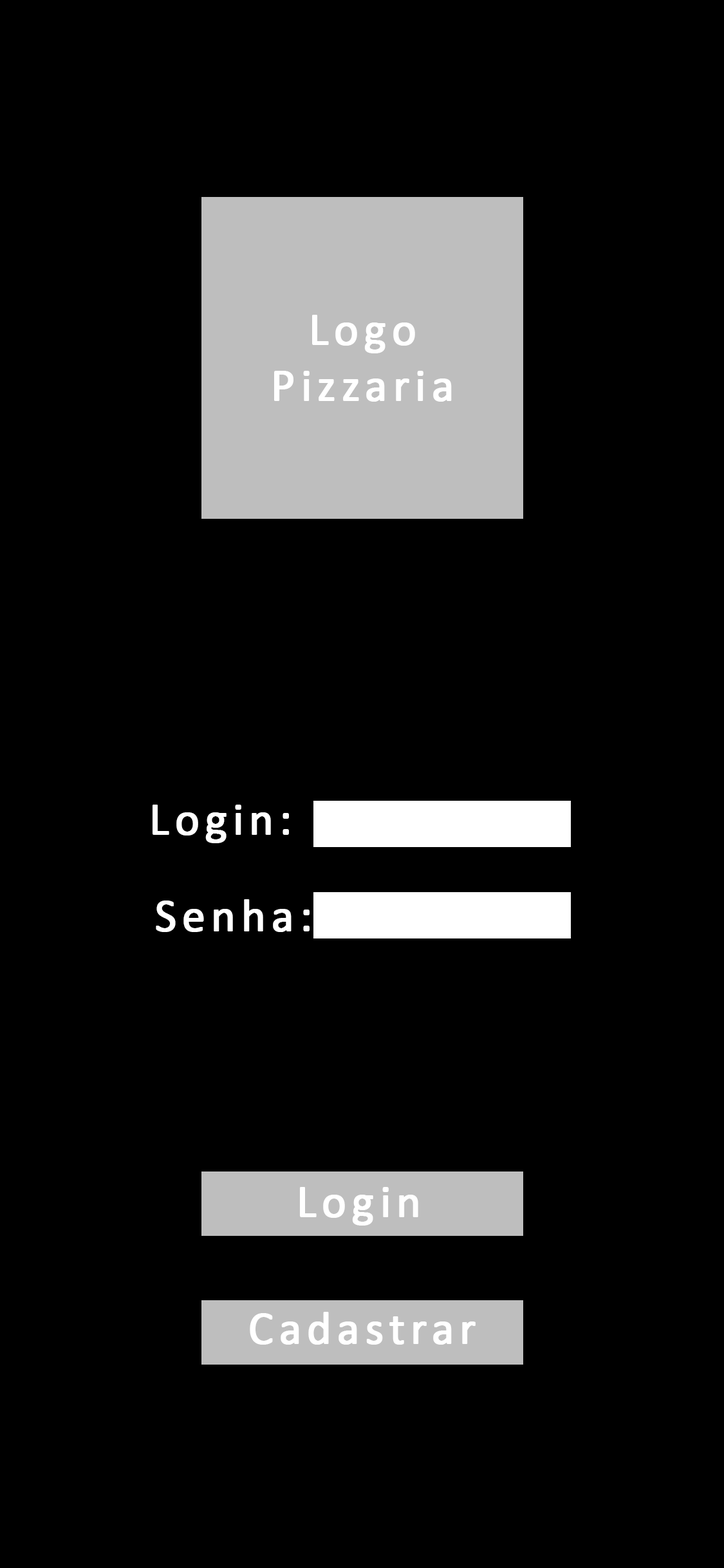
<style>
.page{position:relative;width:724px;height:1568px;background:#000000}
.page>*{position:absolute;margin:0}
.t1{font:46.3px "Calibri";letter-spacing:0.1em;color:#ffffff;font-weight:bold}
</style>
<div class="page">
<p class="t1" style="left:274px;top:315px;width:178px;height:87px;text-align:center">Logo<br>Pizzaria</p>
<p class="t1" style="left:153px;top:805px;width:136px;height:38px">Login:</p>
<p class="t1" style="left:156px;top:899px;width:154px;height:33px">Senha:</p>
<p class="t1" style="left:300px;top:1187px;width:118px;height:39px">Login</p>
<p class="t1" style="left:250px;top:1312px;width:226px;height:33px">Cadastrar</p>
</div>
